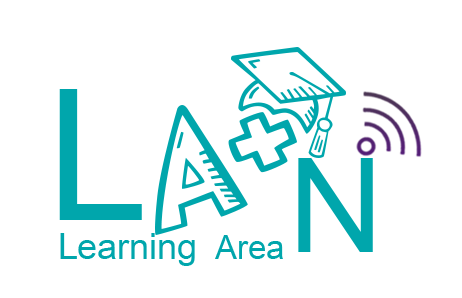
<style>
.page{position:relative;width:462px;height:298px;background:#ffffff}
.page>*{position:absolute;margin:0}
.t1{font:182.9px "ArialUnicodeMS";color:#00a6ac}
.t2{font:132.1px "ArialUnicodeMS";color:#00a6ac}
.t3{font:35.7px "ArialUnicodeMS";color:#00a6ac}
.t4{font:32.6px "ArialUnicodeMS";color:#00a6ac}
</style>
<div class="page">
<p class="t1" style="left:59px;top:89px;width:83px;height:131px">L</p>
<p class="t2" style="left:298px;top:158px;width:75px;height:94px">N</p>
<p class="t3" style="left:60px;top:233px;width:135px;height:33px">Learning</p>
<p class="t4" style="left:215px;top:235px;width:68px;height:24px">Area</p>
</div>
